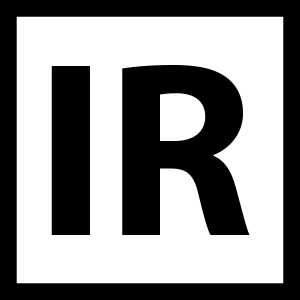
<style>
.page{position:relative;width:300px;height:300px;background:#ffffff}
.page>*{position:absolute;margin:0}
.t1{font:250px "MyriadPro-Bold";color:#000000}
</style>
<div class="page">
<p class="t1" style="left:51px;top:65px;width:199px;height:170px">IR</p>
</div>
